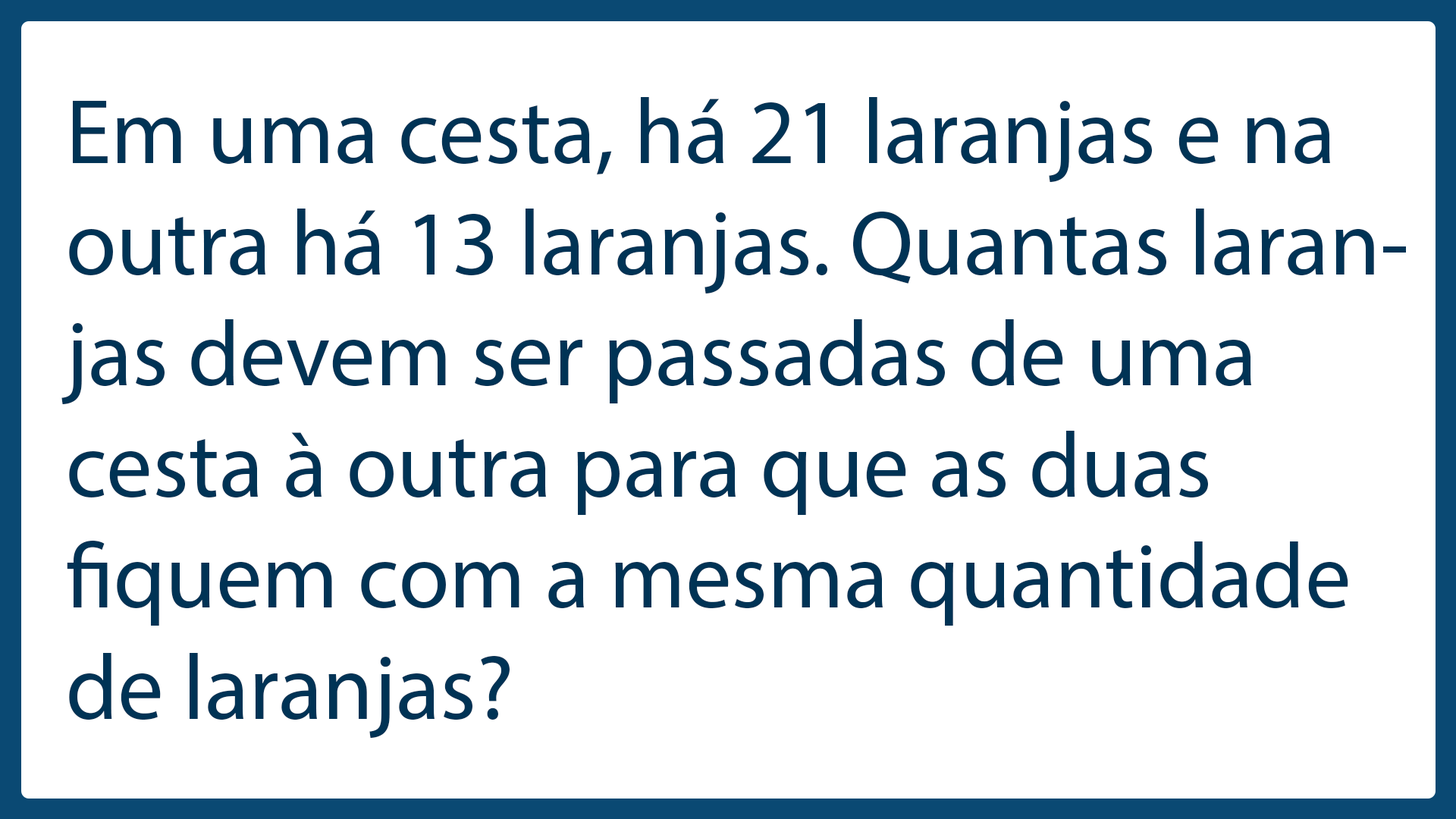
<style>
.page{position:relative;width:1456px;height:819px;background:#ffffff}
.page>*{position:absolute;margin:0}
.t1{font:92.6px "MyriadPro-Regular";color:#003355}
</style>
<div class="page">
<p class="t1" style="left:61px;top:97px;width:1345px;height:641px">Em uma cesta, há 21 laranjas e na outra há 13 laranjas. Quantas laranjas devem ser passadas de uma cesta à outra para que as duas fiquem com a mesma quantidade de laranjas?</p>
</div>
